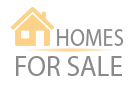
<style>
.page{position:relative;width:140px;height:100px;background:#ffffff}
.page>*{position:absolute;margin:0}
.t1{font:24.8px "MyriadPro-Regular";color:#8a8a8a;scale:0.89 1}
.t2{font:29.1px "MyriadPro-Regular";color:#8a8a8a;scale:0.94 1}
</style>
<div class="page">
<p class="t1" style="left:57px;top:29px;width:67px;height:17px">HOMES</p>
<p class="t2" style="left:16px;top:56px;width:106px;height:20px">FOR SALE</p>
</div>
